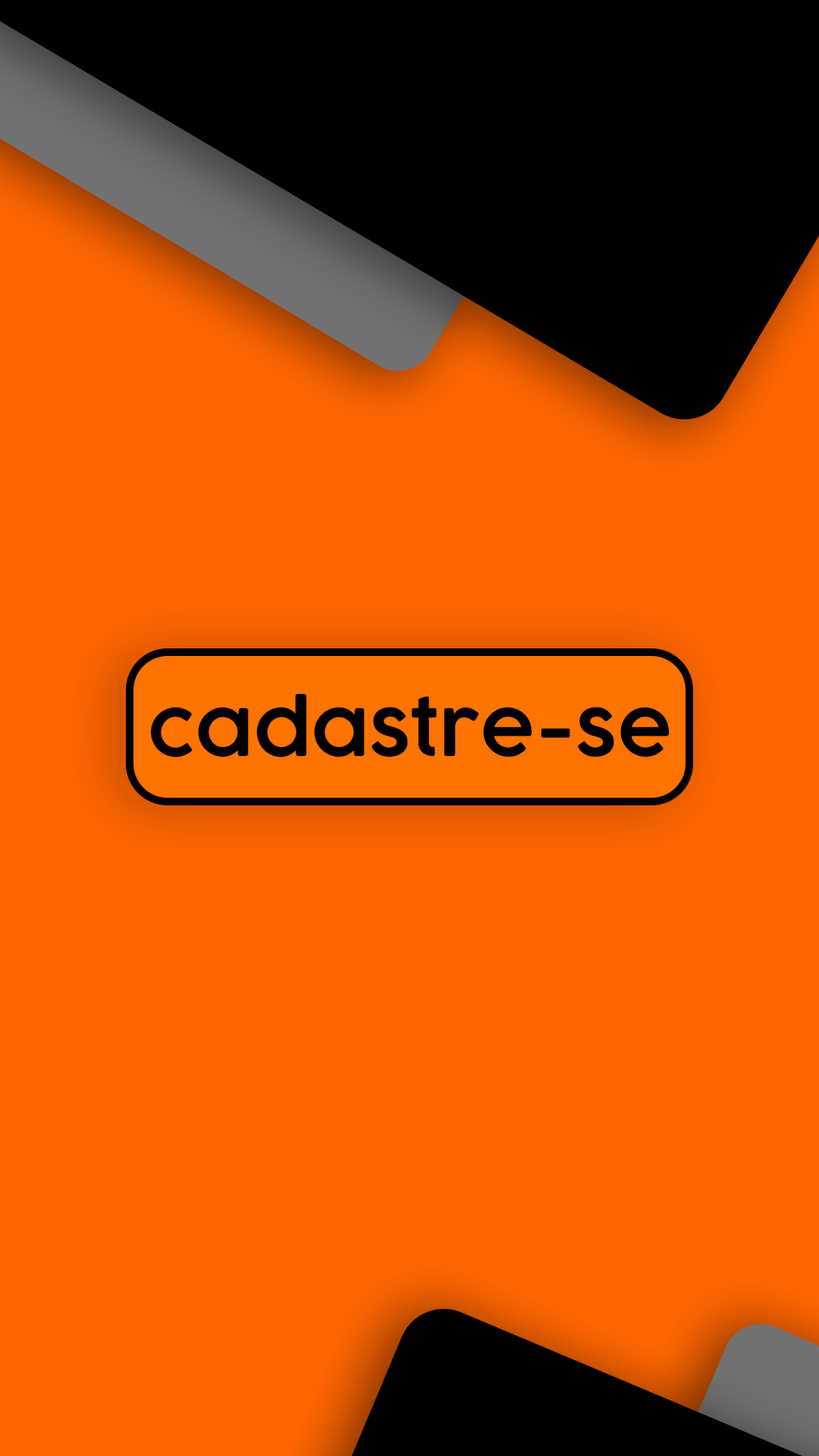
<style>
.page{position:relative;width:819px;height:1456px;background:#ff6600}
.page>*{position:absolute;margin:0}
.t1{font:75.5px "COCOGOOSE-DemiBold";color:#000000}
</style>
<div class="page">
<p class="t1" style="left:151px;top:694px;width:518px;height:64px">cadastre-se</p>
</div>
